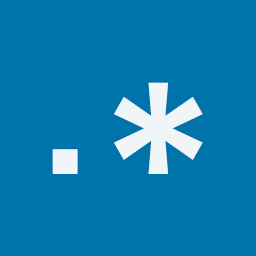
<style>
.page{position:relative;width:256px;height:256px;background:#0073aa}
.page>*{position:absolute;margin:0}
.t1{font:200px "AnonymousPro-Bold";letter-spacing:-0.08em;color:#ffffff}
</style>
<div class="page">
<p class="t1" style="left:52px;top:82px;width:151px;height:92px">.*</p>
</div>
